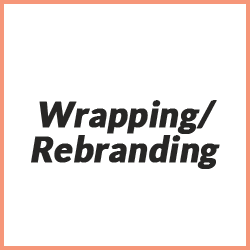
<style>
.page{position:relative;width:250px;height:250px;background:#ffffff}
.page>*{position:absolute;margin:0}
.t1{font:35.2px "Lato-Black";color:#272625;font-weight:bold;font-style:italic;scale:0.96 1}
</style>
<div class="page">
<p class="t1" style="left:31px;top:100px;width:189px;height:69px;text-align:center">Wrapping/<br>Rebranding</p>
</div>
